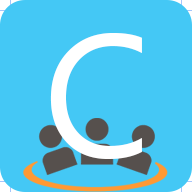
<style>
.page{position:relative;width:192px;height:192px;background:#44c8f5}
.page>*{position:absolute;margin:0}
.t1{font:174.4px "MicrosoftNewTaiLue";color:#ffffff}
</style>
<div class="page">
<p class="t1" style="left:50px;top:33px;width:92px;height:126px">C</p>
</div>
